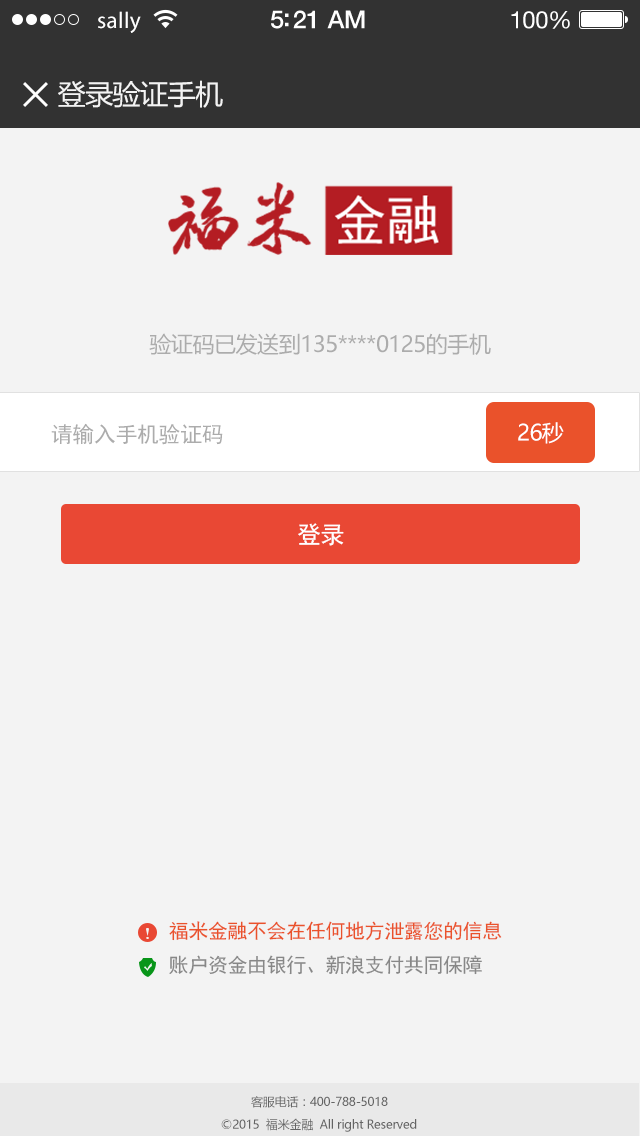
<style>
.page{position:relative;width:640px;height:1136px;background:#f3f3f3}
.page>*{position:absolute;margin:0}
.t1{font:23px "MyriadPro-Regular";letter-spacing:0.02em;color:#ffffff}
.t2{font:25px "HelveticaNeue-Medium";letter-spacing:-0.02em;color:#ffffff}
.t3{font:24px "HelveticaNeue";letter-spacing:-0.02em;color:#ffffff}
.t4{font:28px "MicrosoftYaHei";letter-spacing:-0.02em;color:#f3f3f3}
.t5{font:22px "MicrosoftYaHei";letter-spacing:-0.02em;color:#acacac}
.t6{font:22px "SimHei";letter-spacing:-0.02em;color:#acacac}
.t7{font:22px "MicrosoftYaHei";letter-spacing:-0.02em;color:#ffffff}
.t8{font:24px "SimHei";letter-spacing:-0.02em;color:#ffffff}
.t9{font:20px "SimHei";letter-spacing:-0.02em;color:#ea522b}
.t10{font:20px "SimHei";letter-spacing:-0.02em;color:#878787}
.t11{font:12px "MicrosoftYaHei";letter-spacing:-0.02em;color:#646464}
</style>
<div class="page">
<p class="t1" style="left:98px;top:11px;width:43px;height:22px">sally</p>
<p class="t2" style="left:271px;top:10px;width:94px;height:19px">5:21 AM</p>
<p class="t3" style="left:511px;top:11px;width:59px;height:18px">100%</p>
<p class="t4" style="left:58px;top:80px;width:165px;height:28px">登录验证手机</p>
<p class="t5" style="left:149px;top:333px;width:342px;height:22px">验证码已发送到135****0125的手机</p>
<p class="t6" style="left:51px;top:423px;width:172px;height:22px">请输入手机验证码</p>
<p class="t7" style="left:518px;top:422px;width:46px;height:22px">26秒</p>
<p class="t8" style="left:298px;top:523px;width:46px;height:23px">登录</p>
<p class="t9" style="left:169px;top:921px;width:333px;height:20px">福米金融不会在任何地方泄露您的信息</p>
<p class="t10" style="left:169px;top:955px;width:313px;height:20px">账户资金由银行、新浪支付共同保障</p>
<p class="t11" style="left:251px;top:1096px;width:137px;height:12px">客服电话：400-788-5018</p>
<p class="t11" style="left:221px;top:1118px;width:196px;height:14px">©2015  福米金融  All right Reserved</p>
</div>
